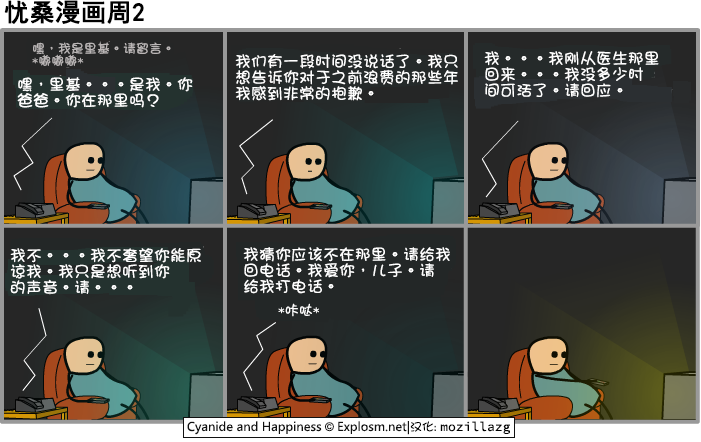
<style>
.page{position:relative;width:701px;height:442px}
.page>*{position:absolute;margin:0}
.t1{font:25px "SimHei";color:#000000;font-weight:bold}
.t2{font:13px/12px "DFGirl";color:#bab6b6}
.t3{font:16px/16px "DFGirl";color:#ffffff}
.t4{font:14px "DFGirl";color:#ffffff}
</style>
<div class="page">
<p class="t1" style="left:4px;top:0px;width:140px;height:24px">忧桑漫画周2</p>
<p class="t2" style="left:32px;top:42px;width:139px;height:24px">嘿，我是里基。请留言。<br>*嘟嘟嘟*</p>
<p class="t3" style="left:235px;top:54px;width:223px;height:47px">我们有一段时间没说话了。我只<br>想告诉你对于之前浪费的那些年<br>我感到非常的抱歉。</p>
<p class="t3" style="left:484px;top:51px;width:175px;height:47px">我。。。我刚从医生那里<br>回来。。。我没多少时<br>间可活了。请回应。</p>
<p class="t3" style="left:17px;top:77px;width:176px;height:31px">嘿，里基。。。是我。你<br>爸爸。你在那里吗？</p>
<p class="t3" style="left:10px;top:248px;width:191px;height:46px">我不。。。我不奢望你能原<br>谅我。我只是想听到你<br>的声音。请。。。</p>
<p class="t3" style="left:243px;top:247px;width:207px;height:47px">我猜你应该不在那里。请给我<br>回电话。我爱你，儿子。请<br>给我打电话。</p>
<p class="t4" style="left:278px;top:303px;width:41px;height:14px">*咔哒*</p>
</div>
